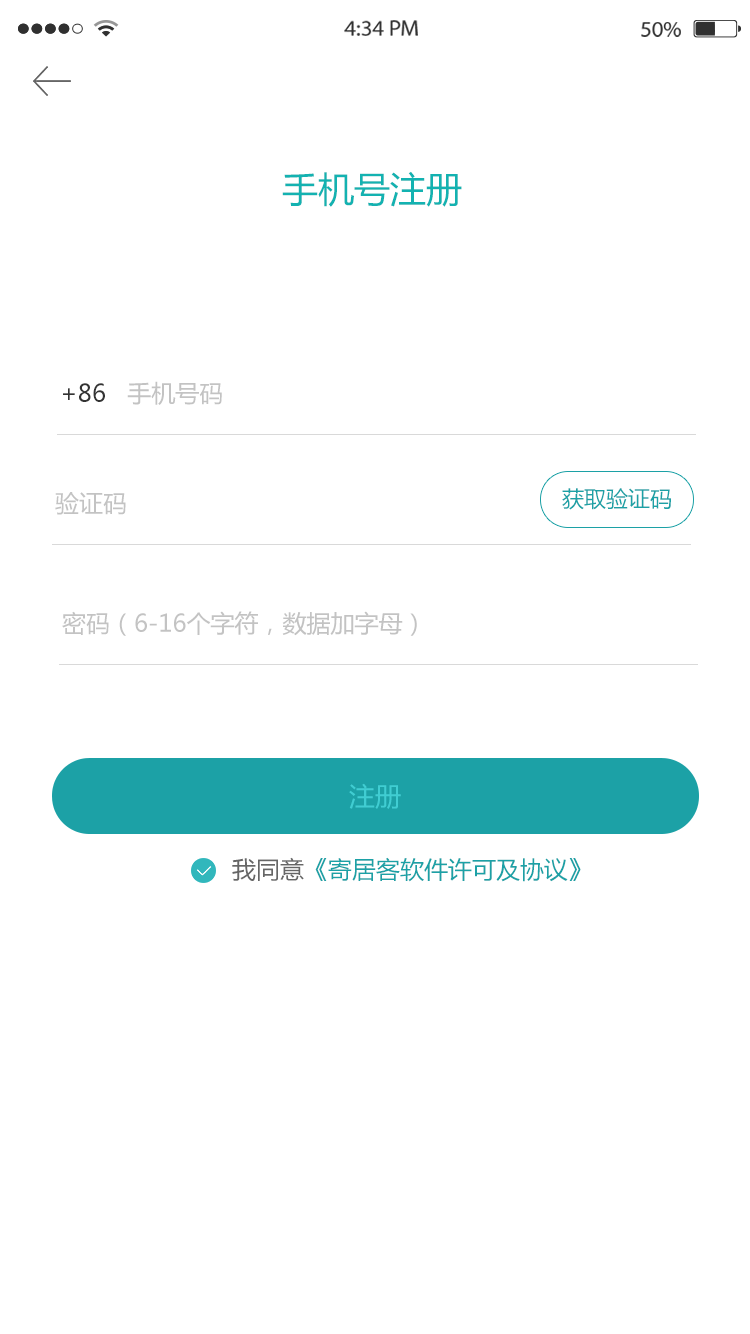
<style>
.page{position:relative;width:750px;height:1334px;background:#ffffff}
.page>*{position:absolute;margin:0}
.t1{font:22px "MyriadPro-Regular";color:#303030;scale:1.06 1}
.t2{font:22px "MyriadPro-Regular";color:#323232;scale:1.06 1}
.t3{font:36px "MicrosoftYaHei";color:#13b2b1}
.t4{font:24px "MicrosoftYaHei";color:#c3c3c3}
.t5{font:24px "MicrosoftYaHei";color:#333333}
.t6{font:22px "MicrosoftYaHei";color:#1ca1a6}
.t7{font:26px "MicrosoftYaHei";color:#40cdd2}
.t8{font:24px "MicrosoftYaHei";color:#1ca1a6}
.t9{font:24px "MicrosoftYaHei";color:#666666}
</style>
<div class="page">
<p class="t1" style="left:344px;top:20px;width:74px;height:16px">4:34 PM</p>
<p class="t2" style="left:641px;top:22px;width:40px;height:15px">50%</p>
<p class="t3" style="left:282px;top:171px;width:180px;height:36px">手机号注册</p>
<p class="t4" style="left:63px;top:381px;width:159px;height:24px"><span class="t5">+86</span>   手机号码</p>
<p class="t4" style="left:55px;top:492px;width:71px;height:23px">验证码</p>
<p class="t6" style="left:562px;top:488px;width:109px;height:22px">获取验证码</p>
<p class="t4" style="left:62px;top:611px;width:355px;height:25px">密码（6-16个字符，数据加字母）</p>
<p class="t7" style="left:349px;top:783px;width:52px;height:26px">注册</p>
<p class="t8" style="left:232px;top:857px;width:349px;height:25px"><span class="t9">我同意</span>《寄居客软件许可及协议》</p>
</div>
